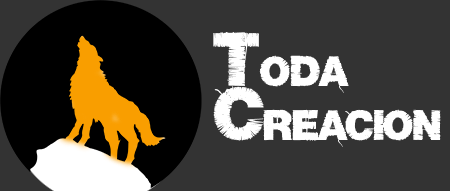
<style>
.page{position:relative;width:450px;height:191px;background:#333333}
.page>*{position:absolute;margin:0}
.t1{font:37.5px/54.2px "Base05";color:#ffffff}
.t2{font:66.7px/54.2px "Base05";color:#ffffff}
</style>
<div class="page">
<p class="t1" style="left:213px;top:32px;width:228px;height:115px"><span class="t2">T</span>ODA <br><span class="t2">C</span>REACION</p>
</div>
